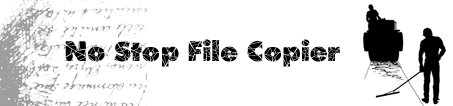
<style>
.page{position:relative;width:453px;height:106px;background:#ffffff}
.page>*{position:absolute;margin:0}
.t1{font:30px "Shatter";color:#000000}
</style>
<div class="page">
<p class="t1" style="left:65px;top:39px;width:275px;height:28px">No Stop File Copier</p>
</div>
